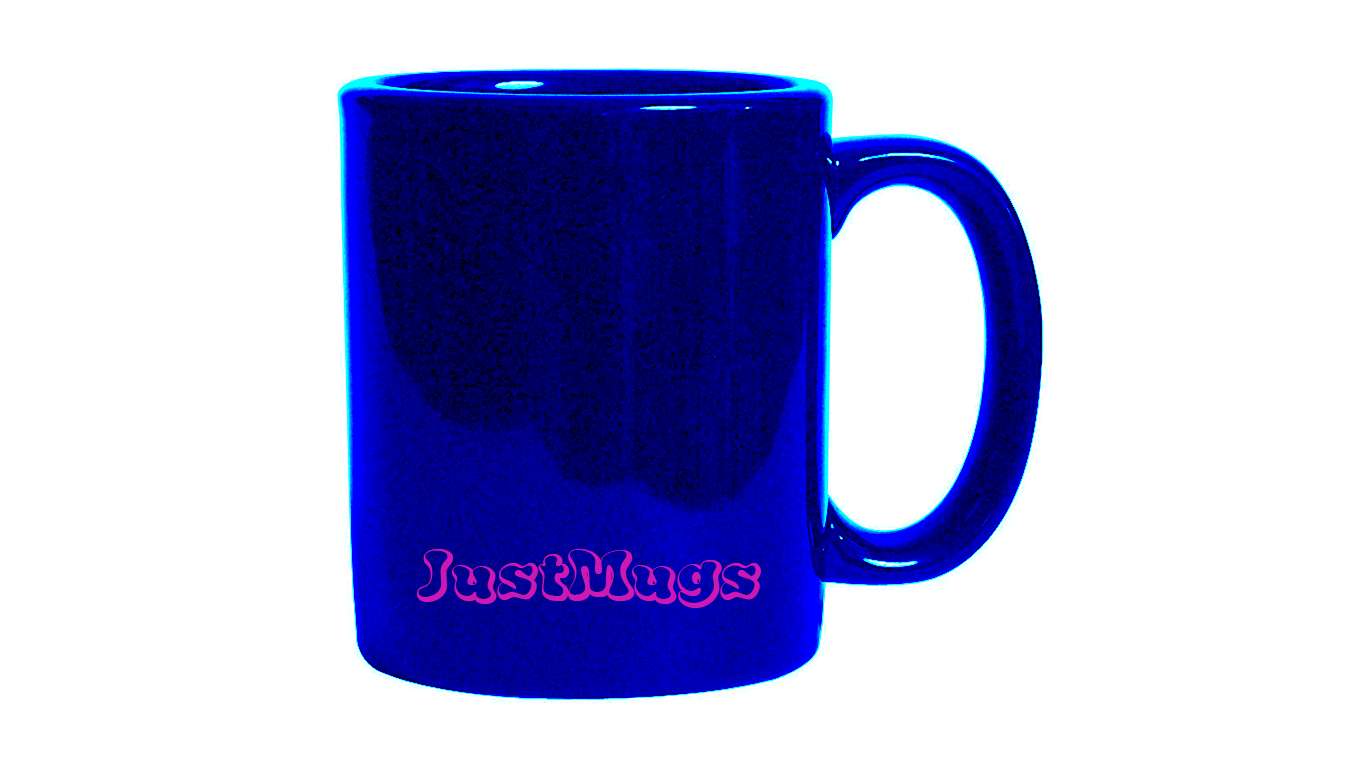
<style>
.page{position:relative;width:1366px;height:768px;background:#ffffff}
.page>*{position:absolute;margin:0}
.t1{font:60px "CandyPop!";color:#ce18b4}
</style>
<div class="page">
<p class="t1" style="left:417px;top:549px;width:344px;height:59px">JustMugs</p>
</div>
